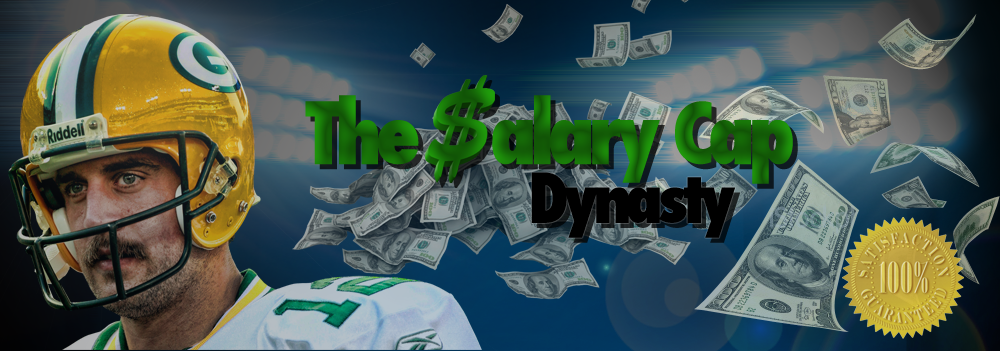
<style>
.page{position:relative;width:1000px;height:351px}
.page>*{position:absolute;margin:0}
.t1{font:83.3px "Futura-CondensedExtraBold";letter-spacing:-0.075em;color:#156707}
.t2{font:66.7px "Futura-CondensedExtraBold";letter-spacing:-0.075em;color:#000000}
</style>
<div class="page">
<p class="t1" style="left:305px;top:95px;width:488px;height:89px">The    alary Cap</p>
<p class="t2" style="left:531px;top:172px;width:204px;height:66px">Dynasty</p>
</div>
